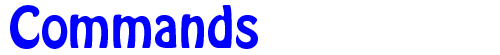
<style>
.page{position:relative;width:500px;height:55px;background:#ffffff}
.page>*{position:absolute;margin:0}
.t1{font:50px "HoboStd";color:#0000ff}
</style>
<div class="page">
<p class="t1" style="left:10px;top:5px;width:248px;height:44px">Commands</p>
</div>
